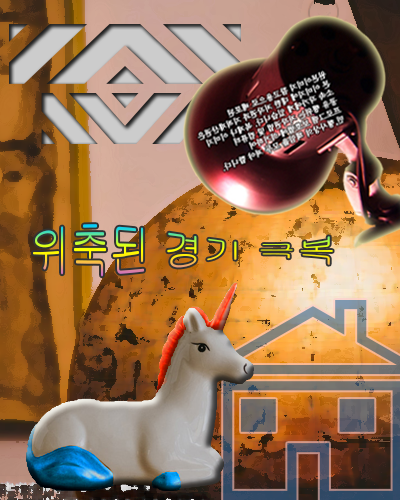
<style>
.page{position:relative;width:400px;height:500px}
.page>*{position:absolute;margin:0}
.t1{font:40px "Gulim"}
</style>
<div class="page">
<p class="t1" style="left:33px;top:224px;width:300px;height:53px">위축된 경기 극복</p>
</div>
